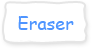
<style>
.page{position:relative;width:92px;height:49px;background:#ffffff}
.page>*{position:absolute;margin:0}
.t1{font:18px "ComicSansMS";color:#4f95ff}
</style>
<div class="page">
<p class="t1" style="left:18px;top:16px;width:56px;height:14px">Eraser</p>
</div>
